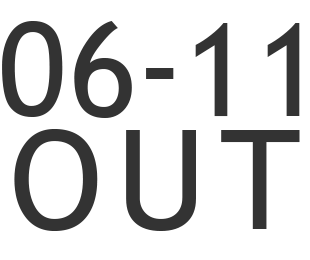
<style>
.page{position:relative;width:310px;height:260px;background:#ffffff}
.page>*{position:absolute;margin:0}
.t1{font:130px "TrebuchetMS";letter-spacing:0.025em;color:#333333}
.t2{font:138.4px "TrebuchetMS";letter-spacing:0.1em;color:#333333}
</style>
<div class="page">
<p class="t1" style="left:2px;top:21px;width:298px;height:97px">06 11</p>
<p class="t1" style="left:146px;top:68px;width:28px;height:11px">-</p>
<p class="t2" style="left:14px;top:129px;width:286px;height:102px">OUT</p>
</div>
